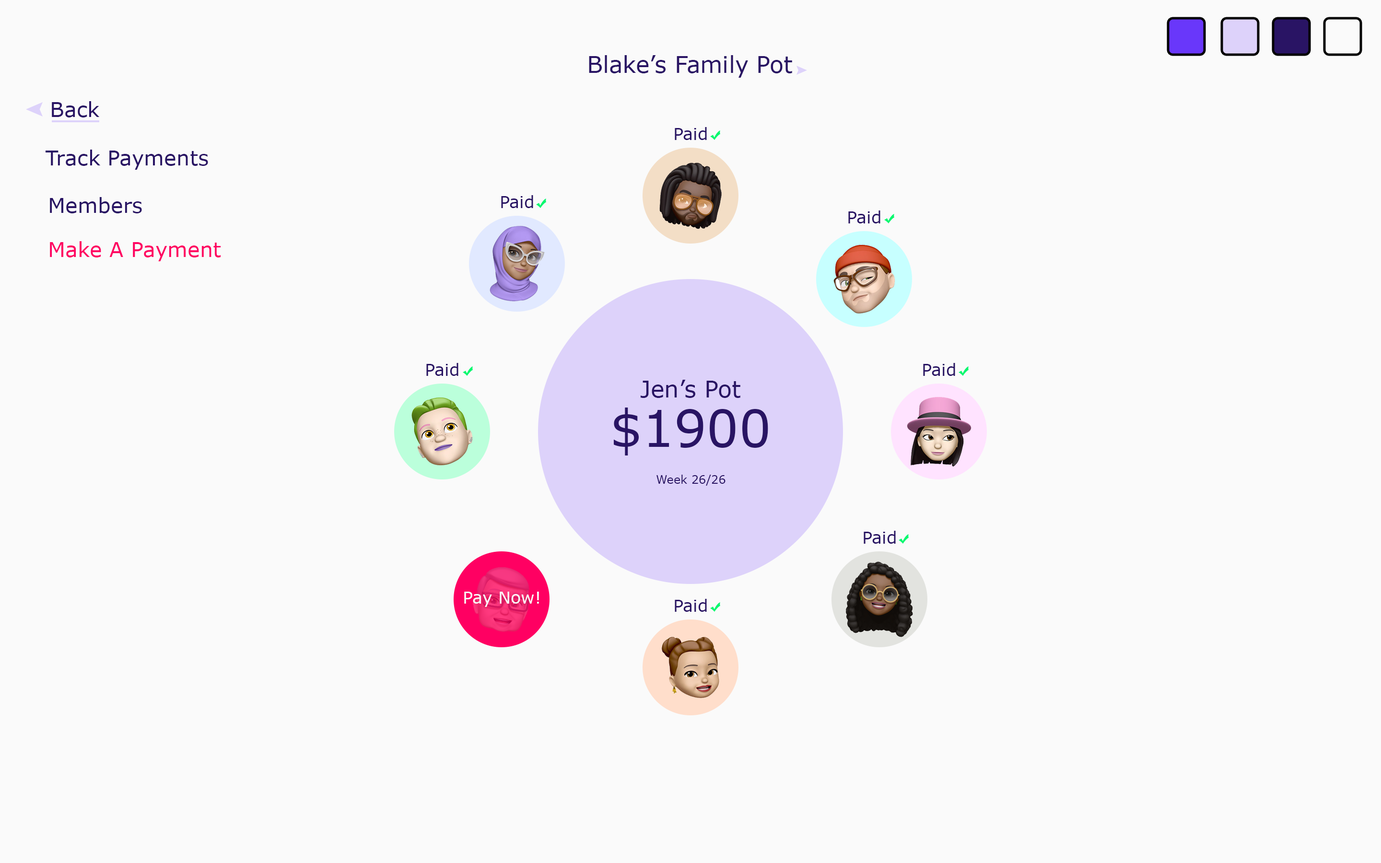
<style>
.page{position:relative;width:1381px;height:863px;background:#fafafa}
.page>*{position:absolute;margin:0}
.t1{font:22.8px "MSReferenceSansSerif";color:#291464}
.t2{font:20.7px "MSReferenceSansSerif";color:#291464}
.t3{font:16.8px "MSReferenceSansSerif";color:#291464}
.t4{font:20.7px "MSReferenceSansSerif";color:#ff0062}
.t5{font:23px "MSReferenceSansSerif";color:#291464}
.t6{font:50.6px "MSReferenceSansSerif";color:#291464}
.t7{font:11.5px "MSReferenceSansSerif";color:#291464}
.t8{font:16.8px "MSReferenceSansSerif";color:#fafafa}
</style>
<div class="page">
<p class="t1" style="left:589px;top:55px;width:203px;height:23px">Blake’s Family Pot</p>
<p class="t2" style="left:52px;top:101px;width:48px;height:17px">Back</p>
<p class="t3" style="left:675px;top:127px;width:32px;height:13px">Paid</p>
<p class="t2" style="left:46px;top:150px;width:162px;height:20px">Track Payments</p>
<p class="t2" style="left:50px;top:197px;width:92px;height:16px">Members</p>
<p class="t3" style="left:501px;top:195px;width:32px;height:13px">Paid</p>
<p class="t3" style="left:848px;top:211px;width:33px;height:12px">Paid</p>
<p class="t4" style="left:50px;top:241px;width:171px;height:20px">Make A Payment</p>
<p class="t3" style="left:426px;top:363px;width:33px;height:13px">Paid</p>
<p class="t3" style="left:923px;top:363px;width:32px;height:13px">Paid</p>
<p class="t5" style="left:641px;top:380px;width:100px;height:18px">Jen’s Pot</p>
<p class="t6" style="left:614px;top:408px;width:154px;height:48px">$1900</p>
<p class="t7" style="left:657px;top:475px;width:69px;height:11px">Week 26/26</p>
<p class="t3" style="left:864px;top:531px;width:32px;height:13px">Paid</p>
<p class="t8" style="left:464px;top:592px;width:75px;height:15px">Pay Now!</p>
<p class="t3" style="left:675px;top:599px;width:32px;height:13px">Paid</p>
</div>
